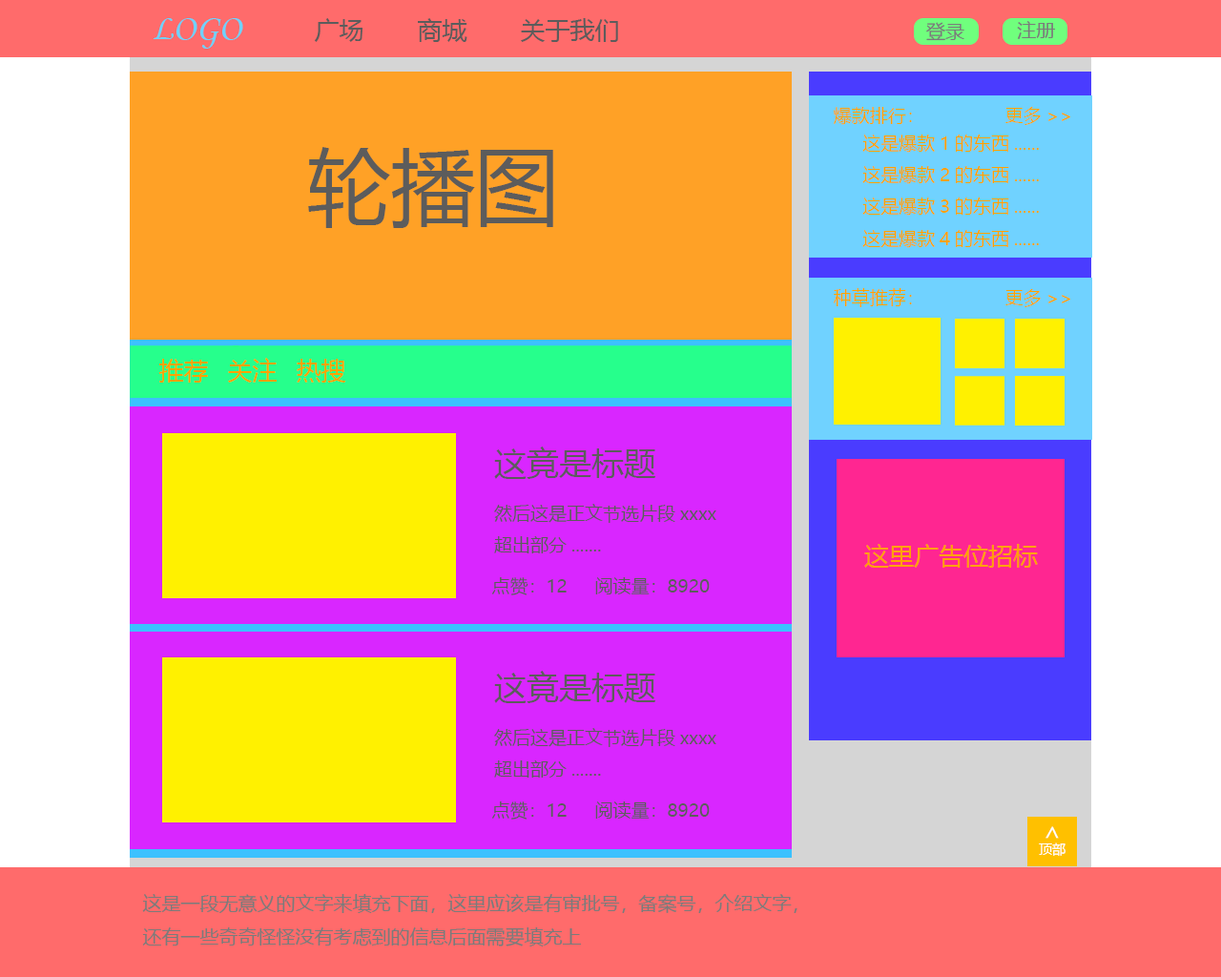
<style>
.page{position:relative;width:1221px;height:977px}
.page>*{position:absolute;margin:0}
.t1{font:24.8px "MicrosoftYaHei";color:#5c5c5c}
.t2{font:18.1px "MicrosoftYaHei";color:#ffa200}
.t3{font:83.9px "MicrosoftYaHei";color:#5c5c5c}
.t4{font:24.8px "MicrosoftYaHei";color:#ffa200}
.t5{font:18.1px "MicrosoftYaHei";color:#5c5c5c}
.t6{font:32.4px "MicrosoftYaHei";color:#5c5c5c}
.t7{font:24.9px "MicrosoftYaHei";color:#ffffff}
.t8{font:13.4px "MicrosoftYaHei";color:#ffffff}
</style>
<div class="page">
<p class="t1" style="left:314px;top:18px;width:304px;height:24px">广场  商城  关于我们</p>
<p class="t2" style="left:834px;top:107px;width:236px;height:18px">爆款排行：   更多&gt;&gt;</p>
<p class="t2" style="left:862px;top:134px;width:177px;height:114px">这是爆款1的东西......<br>这是爆款2的东西......<br>这是爆款3的东西......<br>这是爆款4的东西......</p>
<p class="t3" style="left:308px;top:147px;width:245px;height:81px">轮播图</p>
<p class="t2" style="left:834px;top:288px;width:236px;height:19px">种草推荐：   更多&gt;&gt;</p>
<p class="t4" style="left:158px;top:358px;width:188px;height:24px">推荐 关注 热搜</p>
<p class="t5" style="left:494px;top:446px;width:222px;height:107px"><span class="t6">这竟是标题<br></span>然后这是正文节选片段xxxx<br>超出部分.......</p>
<p class="t4" style="left:864px;top:544px;width:174px;height:24px">这里广告位招标</p>
<p class="t5" style="left:491px;top:577px;width:219px;height:18px">点赞：12 阅读量：8920</p>
<p class="t5" style="left:494px;top:671px;width:222px;height:106px"><span class="t6">这竟是标题<br></span>然后这是正文节选片段xxxx<br>超出部分.......</p>
<p class="t5" style="left:491px;top:801px;width:219px;height:18px">点赞：12 阅读量：8920</p>
<p class="t7" style="left:1045px;top:826px;width:14px;height:12px;rotate:-90deg">&gt;</p>
<p class="t8" style="left:1039px;top:842px;width:26px;height:14px">顶部</p>
</div>
